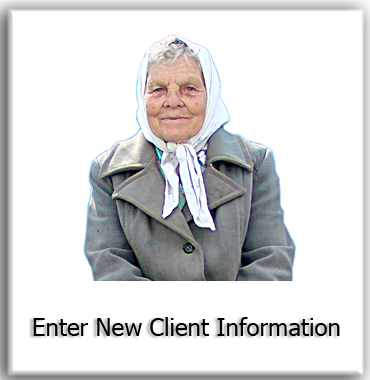
<style>
.page{position:relative;width:370px;height:380px;background:#ffffff}
.page>*{position:absolute;margin:0}
.t1{font:24px "Tahoma";color:#040000}
</style>
<div class="page">
<p class="t1" style="left:33px;top:317px;width:307px;height:19px">Enter New Client Information</p>
</div>
